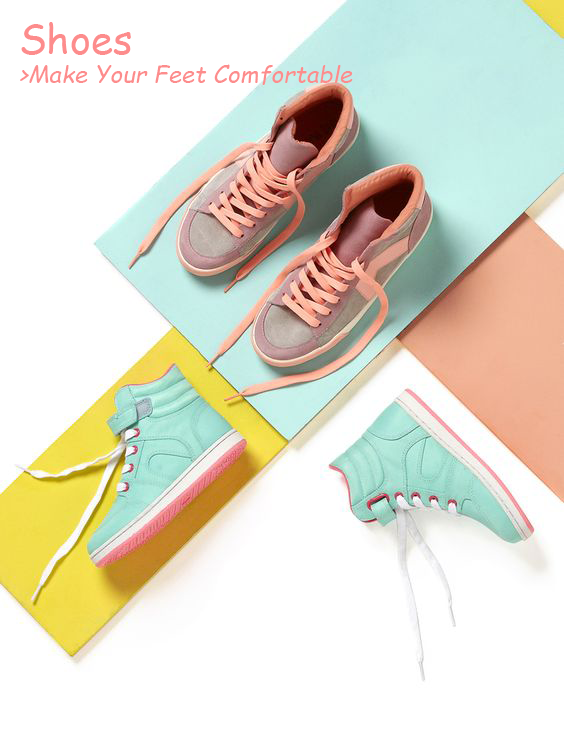
<style>
.page{position:relative;width:564px;height:739px;background:#ffffff}
.page>*{position:absolute;margin:0}
.t1{font:24px "ComicSansMS-Italic";color:#fd8c8c}
.t2{font:40px "ComicSansMS";color:#fd8c8c}
</style>
<div class="page">
<p class="t1" style="left:20px;top:22px;width:333px;height:63px"><span class="t2">Shoes<br></span>&gt;Make Your Feet Comfortable</p>
</div>
